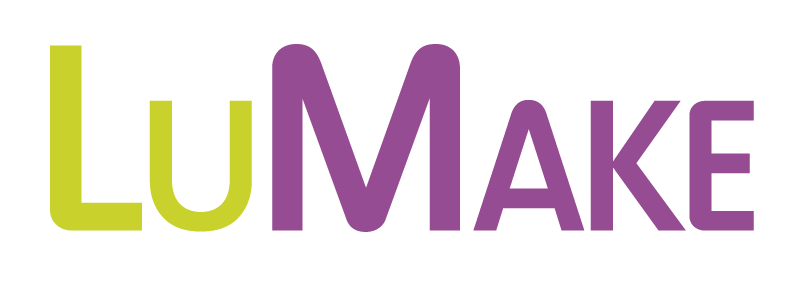
<style>
.page{position:relative;width:800px;height:300px;background:#ffffff}
.page>*{position:absolute;margin:0}
.t1{font:276px "Harry-Heavy";letter-spacing:0.005em;color:#954c92;font-variant:small-caps;scale:1.1 1}
.t2{font:276px "Harry-Heavy";letter-spacing:0.005em;color:#c9d22c;font-variant:small-caps;scale:1.1 1}
</style>
<div class="page">
<p class="t1" style="left:50px;top:44px;width:704px;height:188px"><span class="t2">Lu</span>Make</p>
</div>
